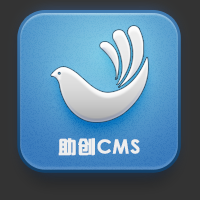
<style>
.page{position:relative;width:200px;height:200px}
.page>*{position:absolute;margin:0}
.t1{font:18px "hzgb";letter-spacing:0.04em;color:#eeeeee;font-weight:bold}
</style>
<div class="page">
<p class="t1" style="left:58px;top:138px;width:82px;height:18px">助创CMS</p>
</div>
